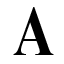
<style>
.page{position:relative;width:64px;height:64px;background:#ffffff}
.page>*{position:absolute;margin:0}
.t1{font:70px "TimesNewRomanPS-BoldMT";color:#000000;scale:0.81 1}
</style>
<div class="page">
<p class="t1" style="left:13px;top:7px;width:41px;height:48px">A</p>
</div>
